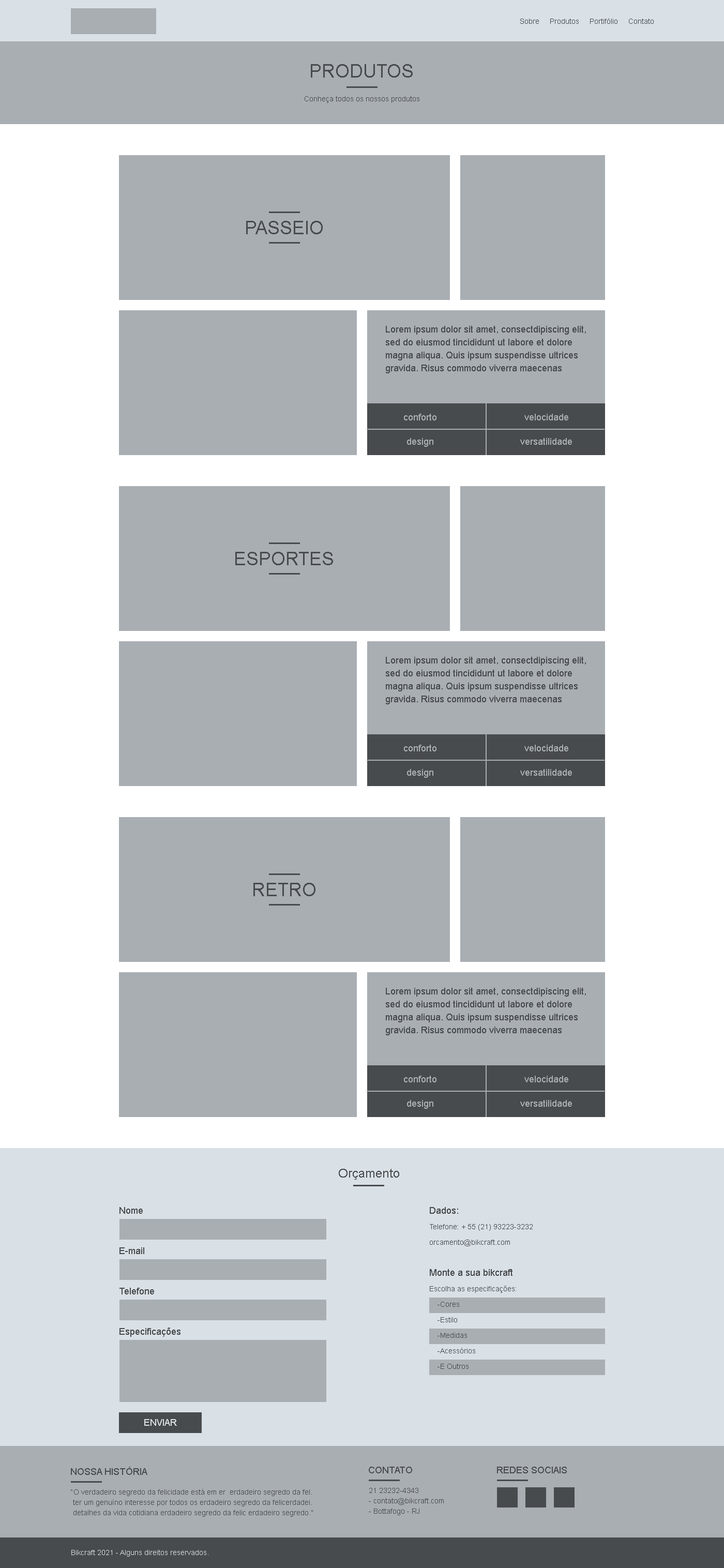
<style>
.page{position:relative;width:724px;height:1568px;background:#a9aeb3}
.page>*{position:absolute;margin:0}
.t1{font:7.2px "ArialMT";color:#484b4d}
.t2{font:18.6px "ArialMT";color:#484b4d;text-transform:uppercase}
.t3{font:9.3px/12.9px "ArialMT";color:#484b4d}
.t4{font:9.3px "ArialMT";color:#a9aeb3}
.t5{font:12.4px "ArialMT";color:#484b4d}
.t6{font:9.3px "ArialMT";color:#484b4d}
.t7{font:7.2px/15.5px "ArialMT";color:#484b4d}
.t8{font:9.3px/15.5px "ArialMT";color:#484b4d}
.t9{font:9.3px "ArialMT";color:#d9e0e6}
.t10{font:7.2px/10.3px "ArialMT";color:#484b4d}
.t11{font:7.2px "ArialMT";color:#d9e0e6}
</style>
<div class="page">
<p class="t1" style="left:520px;top:18px;width:134px;height:6px">Sobre     Produtos     Portifólio     Contato</p>
<p class="t2" style="left:311px;top:64px;width:102px;height:14px">Produtos</p>
<p class="t1" style="left:305px;top:96px;width:114px;height:7px">Conheça todos os nossos produtos</p>
<p class="t2" style="left:246px;top:221px;width:77px;height:13px">passeio</p>
<p class="t3" style="left:386px;top:326px;width:200px;height:47px">Lorem ipsum dolor sit amet, consectdipiscing elit, sed do eiusmod tincididunt ut labore et dolore magna aliqua. Quis ipsum suspendisse ultrices gravida. Risus commodo viverra maecenas</p>
<p class="t4" style="left:404px;top:414px;width:32px;height:6px">conforto</p>
<p class="t4" style="left:524px;top:414px;width:44px;height:6px">velocidade</p>
<p class="t4" style="left:407px;top:438px;width:26px;height:9px">design</p>
<p class="t4" style="left:520px;top:438px;width:52px;height:7px">versatilidade</p>
<p class="t2" style="left:235px;top:552px;width:98px;height:13px">esportes</p>
<p class="t3" style="left:386px;top:657px;width:200px;height:47px">Lorem ipsum dolor sit amet, consectdipiscing elit, sed do eiusmod tincididunt ut labore et dolore magna aliqua. Quis ipsum suspendisse ultrices gravida. Risus commodo viverra maecenas</p>
<p class="t4" style="left:404px;top:745px;width:32px;height:6px">conforto</p>
<p class="t4" style="left:524px;top:745px;width:44px;height:6px">velocidade</p>
<p class="t4" style="left:407px;top:769px;width:26px;height:9px">design</p>
<p class="t4" style="left:520px;top:769px;width:52px;height:7px">versatilidade</p>
<p class="t2" style="left:253px;top:883px;width:62px;height:13px">retro</p>
<p class="t3" style="left:386px;top:988px;width:200px;height:47px">Lorem ipsum dolor sit amet, consectdipiscing elit, sed do eiusmod tincididunt ut labore et dolore magna aliqua. Quis ipsum suspendisse ultrices gravida. Risus commodo viverra maecenas</p>
<p class="t4" style="left:404px;top:1076px;width:32px;height:6px">conforto</p>
<p class="t4" style="left:524px;top:1076px;width:44px;height:6px">velocidade</p>
<p class="t4" style="left:407px;top:1100px;width:26px;height:9px">design</p>
<p class="t4" style="left:520px;top:1100px;width:52px;height:7px">versatilidade</p>
<p class="t5" style="left:339px;top:1169px;width:60px;height:11px">Orçamento</p>
<p class="t6" style="left:119px;top:1207px;width:24px;height:7px">Nome</p>
<p class="t7" style="left:430px;top:1207px;width:103px;height:162px"><span class="t8">Dados:<br></span>Telefone: + 55 (21) 93223-3232<br>orcamento@bikcraft.com<br><span class="t8"><br>Monte a sua bikcraft<br></span>Escolha as especificações:<br>    -Cores<br>    -Estilo<br>    -Medidas<br>    -Acessórios<br>    -E Outros</p>
<p class="t6" style="left:119px;top:1247px;width:25px;height:7px">E-mail</p>
<p class="t6" style="left:119px;top:1288px;width:35px;height:6px">Telefone</p>
<p class="t6" style="left:119px;top:1328px;width:61px;height:9px">Especificações</p>
<p class="t9" style="left:144px;top:1419px;width:33px;height:7px">ENVIAR</p>
<p class="t6" style="left:71px;top:1467px;width:76px;height:8px">NOSSA HISTÓRIA</p>
<p class="t6" style="left:369px;top:1467px;width:43px;height:6px">CONTATO</p>
<p class="t6" style="left:497px;top:1467px;width:70px;height:6px">REDES SOCIAIS</p>
<p class="t10" style="left:71px;top:1489px;width:242px;height:28px">“O verdadeiro segredo da felicidade está em er  erdadeiro segredo da fel.  <br> ter um genuíno interesse por todos os erdadeiro segredo da felicerdadei.<br> detalhes da vida cotidiana erdadeiro segredo da felic erdadeiro segredo.”</p>
<p class="t10" style="left:369px;top:1488px;width:75px;height:27px">21 23232-4343<br>- contato@bikcraft.com<br>- Bottafogo - RJ</p>
<p class="t11" style="left:71px;top:1550px;width:137px;height:7px">Bikcraft 2021 - Alguns direitos reservados.</p>
</div>
